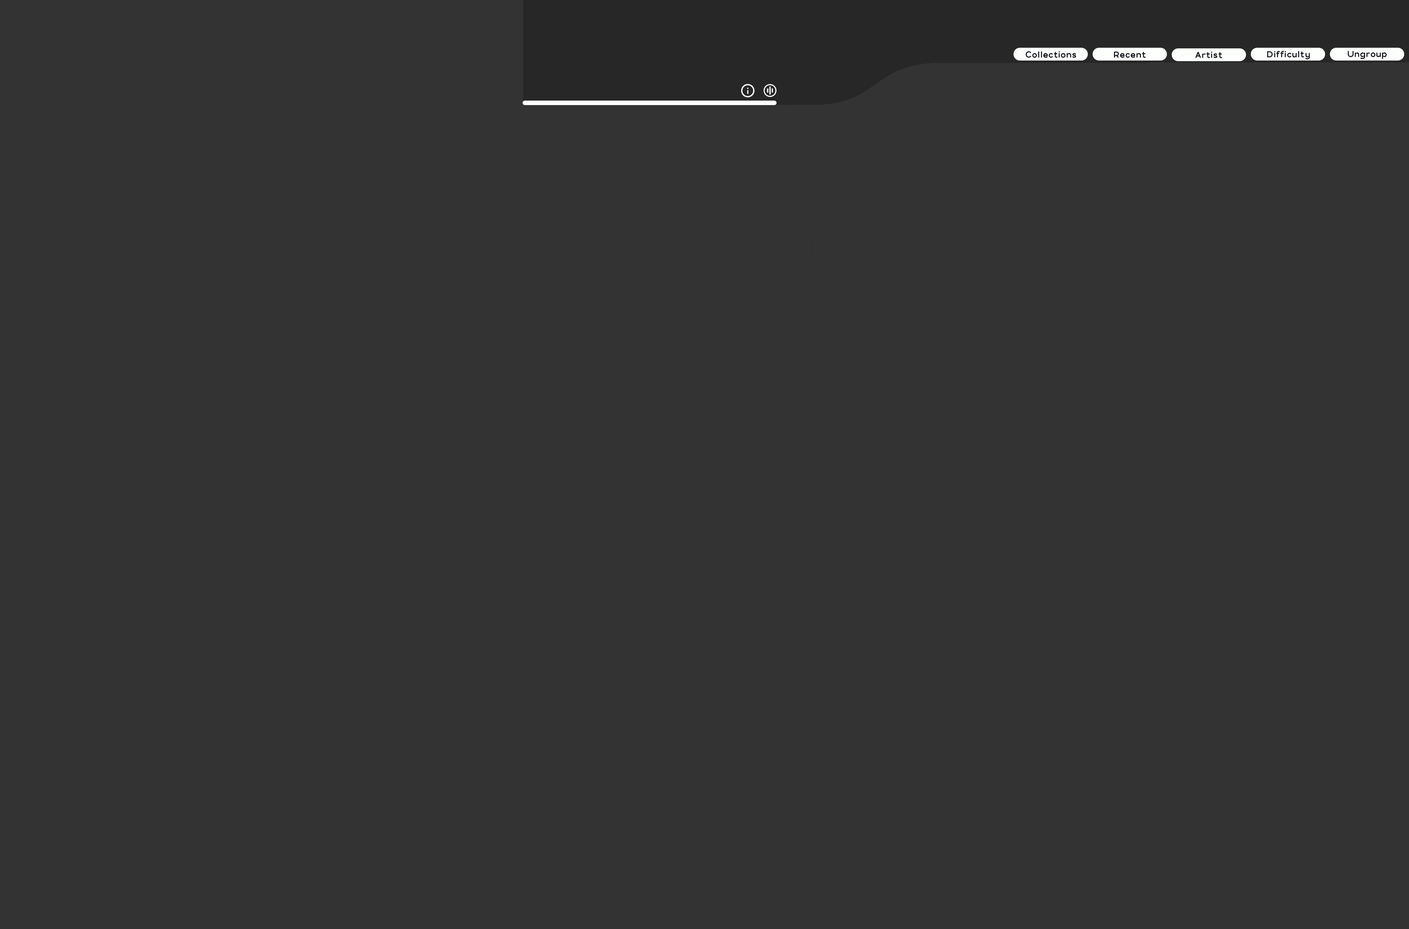
<style>
.page{position:relative;width:1409px;height:929px;background:#333333}
.page>*{position:absolute;margin:0}
.t1{font:9px "PollyRounded-Bold";color:#171a21}
</style>
<div class="page">
<p class="t1" style="left:1026px;top:51px;width:51px;height:7px">Collections</p>
<p class="t1" style="left:1114px;top:52px;width:32px;height:6px">Recent</p>
<p class="t1" style="left:1196px;top:52px;width:27px;height:6px">Artist</p>
<p class="t1" style="left:1268px;top:51px;width:42px;height:9px">Difficulty</p>
<p class="t1" style="left:1348px;top:51px;width:39px;height:8px">Ungroup</p>
</div>
